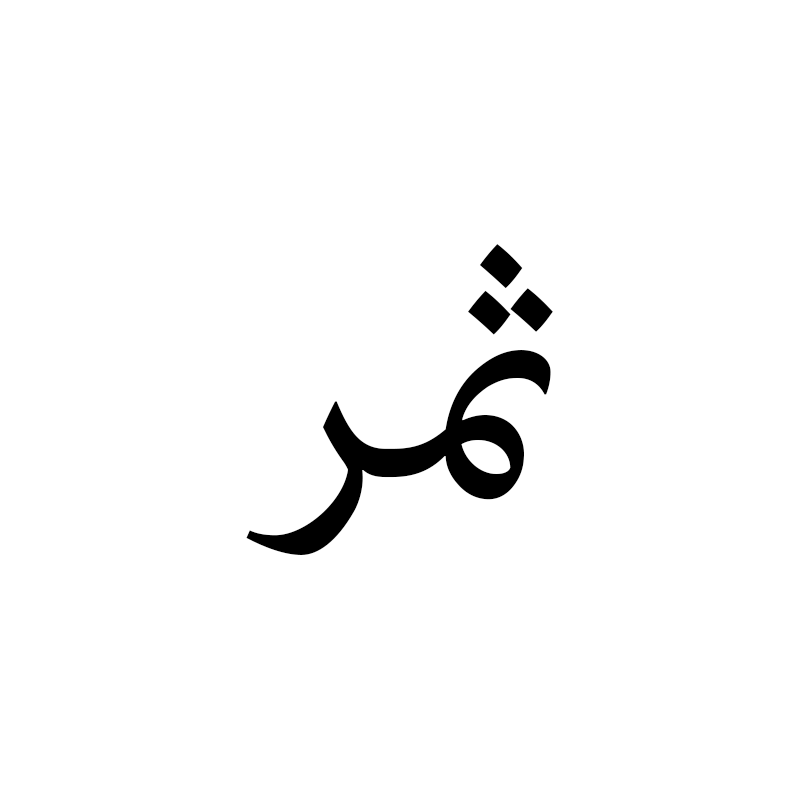
<style>
.page{position:relative;width:800px;height:800px;background:#ffffff}
.page>*{position:absolute;margin:0}
.t1{font:450px "AdobeArabic-Regular";color:#000000}
</style>
<div class="page">
<p class="t1" style="left:246px;top:244px;width:307px;height:311px">ثمر</p>
</div>
